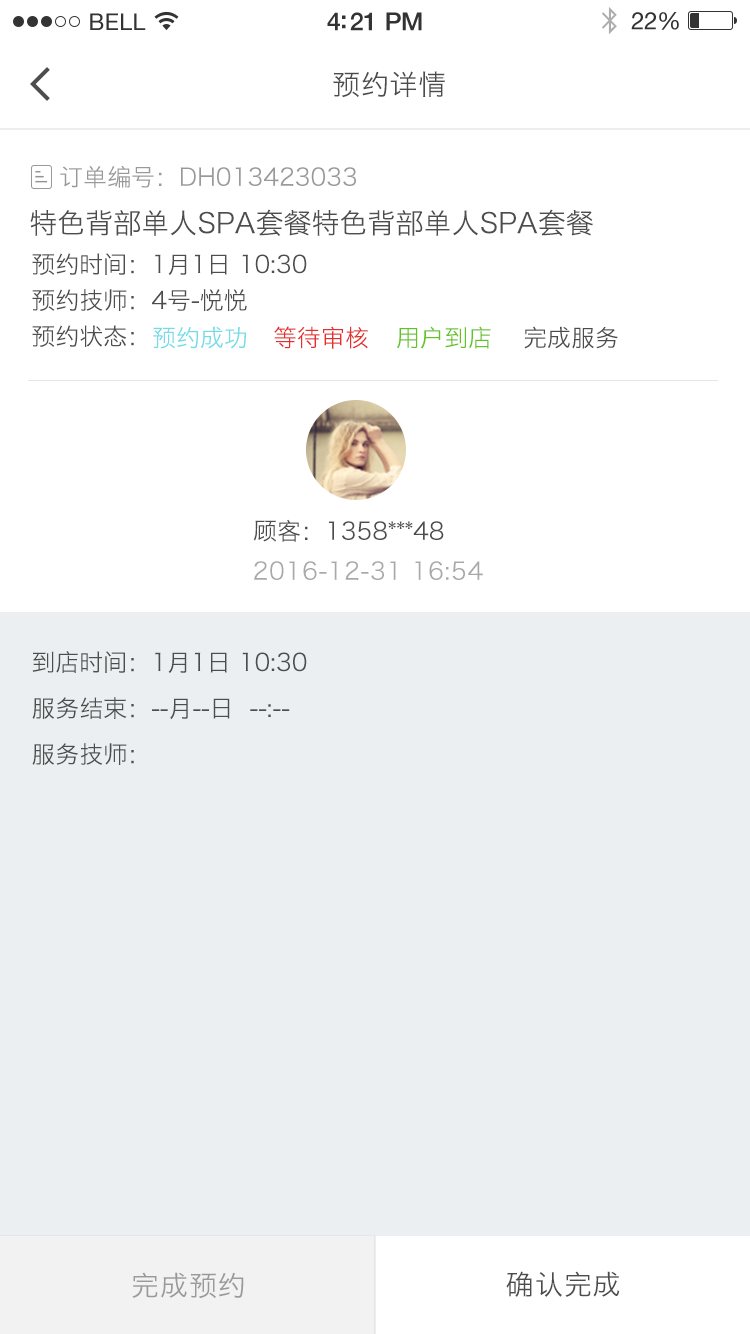
<style>
.page{position:relative;width:750px;height:1334px;background:#ebeff2}
.page>*{position:absolute;margin:0}
.t1{font:28px "HiraginoSansGB-W3";letter-spacing:0.03em;color:#4c4c4c}
.t2{font:24px "HiraginoSansGB-W3";color:#999999}
.t3{font:28px "HiraginoSansGB-W3";color:#4d4d4d}
.t4{font:24px/36px "HiraginoSansGB-W3";color:#4c4c4c}
.t5{font:28px/34px "HiraginoSansGB-W3";color:#4d4d4d}
.t6{font:24px "HiraginoSansGB-W3";color:#73dce6}
.t7{font:24px "HiraginoSansGB-W3";color:#e42f2f}
.t8{font:24px "HiraginoSansGB-W3";color:#63c323}
.t9{font:24px "HiraginoSansGB-W3";color:#4c4c4c}
.t10{font:24px "HiraginoSansGB-W3";letter-spacing:0.03em;color:#a8a8aa}
.t11{font:24px/46px "HiraginoSansGB-W3";color:#4c4c4c}
.t12{font:28px "HiraginoSansGB-W3";letter-spacing:0.03em;color:#999999}
</style>
<div class="page">
<p class="t1" style="left:333px;top:71px;width:112px;height:27px">预约详情</p>
<p class="t2" style="left:60px;top:165px;width:296px;height:23px">订单编号：DH013423033</p>
<p class="t3" style="left:30px;top:209px;width:563px;height:27px">特色背部单人SPA套餐特色背部单人SPA套餐</p>
<p class="t4" style="left:32px;top:253px;width:275px;height:94px"><span class="t5"><br></span>预约时间：1月1日 10:30<br>预约技师：4号-悦悦<br>预约状态：</p>
<p class="t6" style="left:153px;top:326px;width:93px;height:23px">预约成功</p>
<p class="t7" style="left:274px;top:326px;width:94px;height:23px">等待审核</p>
<p class="t8" style="left:396px;top:326px;width:95px;height:23px">用户到店</p>
<p class="t9" style="left:524px;top:326px;width:94px;height:23px">完成服务</p>
<p class="t9" style="left:253px;top:519px;width:191px;height:23px">顾客：1358***48</p>
<p class="t10" style="left:254px;top:561px;width:229px;height:19px">2016-12-31 16:54</p>
<p class="t11" style="left:32px;top:651px;width:275px;height:114px"><span class="t5"><br></span>到店时间：1月1日 10:30<br>服务结束：--月--日  --:--<br>服务技师：</p>
<p class="t12" style="left:132px;top:1272px;width:112px;height:27px">完成预约</p>
<p class="t1" style="left:506px;top:1271px;width:114px;height:26px">确认完成</p>
</div>
